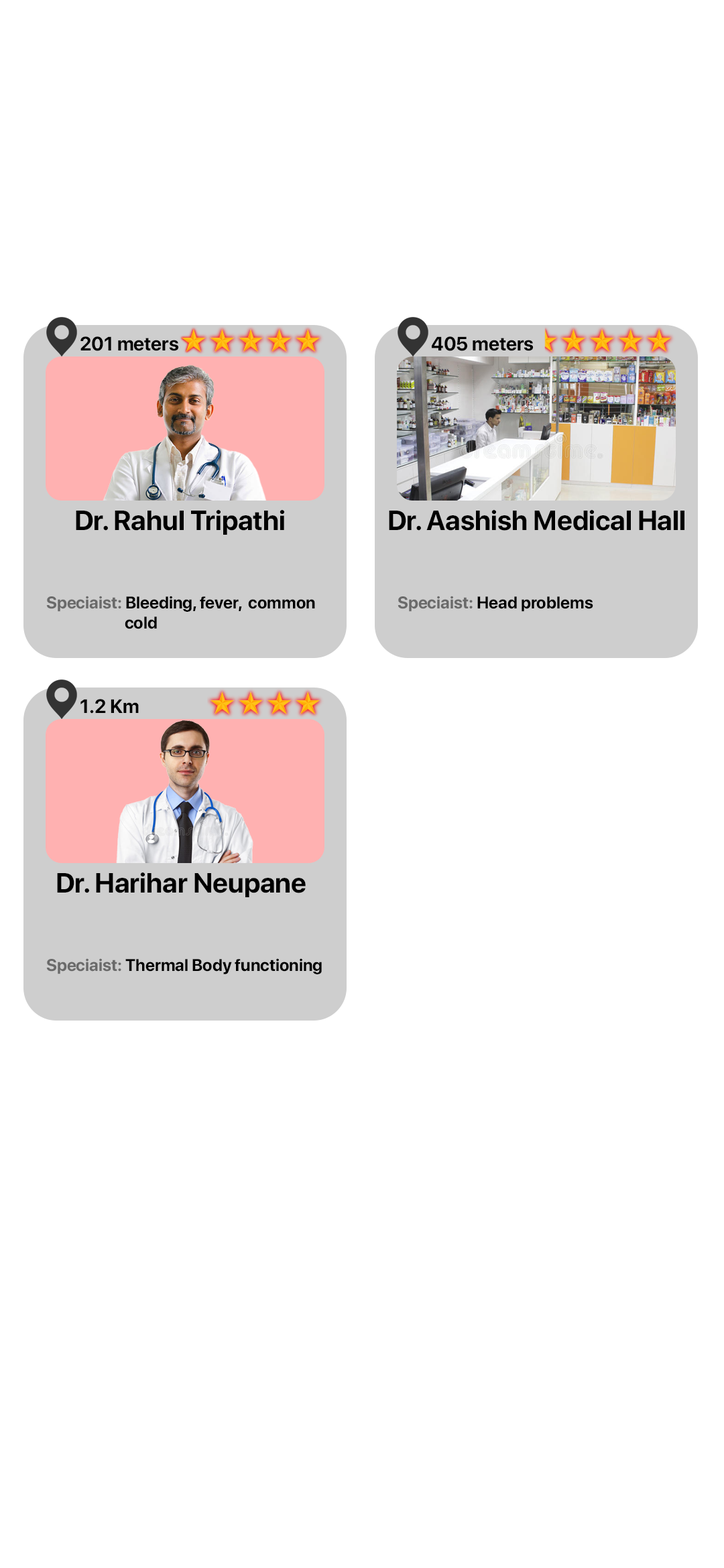
<style>
.page{position:relative;width:724px;height:1568px;background:#ffffff}
.page>*{position:absolute;margin:0}
.t1{font:19.3px "SFProDisplay-Bold";color:#000000}
.t2{font:27.5px "SFProDisplay-Bold";color:#000000}
.t3{font:16.8px "SFProDisplay-Bold";color:#000000}
.t4{font:16.8px "SFProDisplay-Bold";color:#6a6a6a}
</style>
<div class="page">
<p class="t1" style="left:80px;top:336px;width:99px;height:15px">201 meters</p>
<p class="t1" style="left:432px;top:336px;width:101px;height:15px">405 meters</p>
<p class="t2" style="left:76px;top:510px;width:208px;height:25px">Dr. Rahul Tripathi</p>
<p class="t2" style="left:389px;top:510px;width:295px;height:21px">Dr. Aashish Medical Hall</p>
<p class="t3" style="left:46px;top:596px;width:269px;height:33px"><span class="t4">Speciaist: </span>Bleeding, fever,  common <br>       cold</p>
<p class="t3" style="left:397px;top:596px;width:196px;height:16px"><span class="t4">Speciaist: </span>Head problems</p>
<p class="t1" style="left:80px;top:699px;width:59px;height:15px">1.2 Km</p>
<p class="t2" style="left:57px;top:872px;width:249px;height:25px">Dr. Harihar Neupane</p>
<p class="t3" style="left:46px;top:958px;width:276px;height:16px"><span class="t4">Speciaist: </span>Thermal Body functioning</p>
</div>
